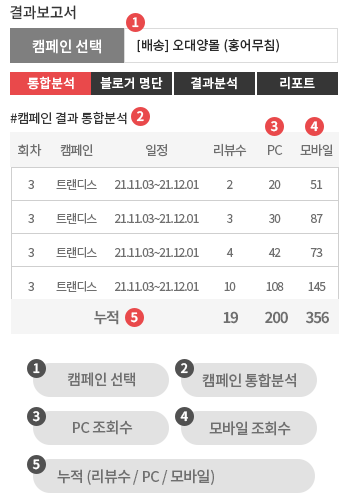
<style>
.page{position:relative;width:350px;height:500px;background:#ffffff}
.page>*{position:absolute;margin:0}
.t1{font:15px "NotoSansKR-Medium";letter-spacing:-0.02em;color:#363636}
.t2{font:13px "NotoSansKR-Bold";color:#ffffff}
.t3{font:15px "NotoSansKR-Medium";letter-spacing:-0.02em;color:#ffffff}
.t4{font:13px "NotoSansKR-Medium";color:#2b2b2b}
.t5{font:13px "NotoSansKR-Medium";color:#ffffff}
.t6{font:13px "NotoSansKR-Regular";letter-spacing:-0.02em;color:#363636}
.t7{font:12px/34px "NotoSansKR-Regular";color:#6f6f6f}
.t8{font:13px/34px "NotoSansKR-Regular";color:#6f6f6f}
.t9{font:12px/34px "NotoSansKR-Regular";letter-spacing:-0.08em;color:#6f6f6f}
.t10{font:13px/34px "NotoSansKR-Regular";letter-spacing:-0.08em;color:#6f6f6f}
.t11{font:15px "NotoSansKR-Bold";letter-spacing:-0.08em;color:#6f6f6f}
.t12{font:15px "NotoSansKR-Medium";letter-spacing:-0.04em;color:#6f6f6f}
</style>
<div class="page">
<p class="t1" style="left:10px;top:5px;width:66px;height:15px">결과보고서</p>
<p class="t2" style="left:132px;top:17px;width:7px;height:11px">1</p>
<p class="t3" style="left:32px;top:39px;width:69px;height:15px">캠페인 선택</p>
<p class="t4" style="left:137px;top:38px;width:142px;height:15px">[배송] 오대양몰 (홍어무침)</p>
<p class="t5" style="left:27px;top:76px;width:47px;height:14px">통합분석</p>
<p class="t5" style="left:100px;top:77px;width:63px;height:12px">블로거 명단</p>
<p class="t5" style="left:191px;top:77px;width:46px;height:13px">결과분석</p>
<p class="t5" style="left:280px;top:76px;width:35px;height:14px">리포트</p>
<p class="t6" style="left:10px;top:111px;width:117px;height:14px">#캠페인 결과 통합분석</p>
<p class="t2" style="left:136px;top:111px;width:8px;height:11px">2</p>
<p class="t2" style="left:270px;top:121px;width:8px;height:11px">3</p>
<p class="t2" style="left:310px;top:121px;width:8px;height:11px">4</p>
<p class="t7" style="left:18px;top:144px;width:24px;height:147px;text-align:center"><span class="t8">회차 <br></span>3<br>3<br>3<br>3</p>
<p class="t9" style="left:56px;top:144px;width:41px;height:148px;text-align:center"><span class="t10">캠페인<br></span>트랜디스<br>트랜디스<br>트랜디스<br>트랜디스</p>
<p class="t9" style="left:115px;top:144px;width:84px;height:147px;text-align:center"><span class="t10">일정<br></span>21.11.03~21.12.01<br>21.11.03~21.12.01<br>21.11.03~21.12.01<br>21.11.03~21.12.01</p>
<p class="t9" style="left:214px;top:143px;width:33px;height:148px;text-align:center"><span class="t10">리뷰수<br></span>2<br>3<br>4<br>10</p>
<p class="t9" style="left:266px;top:145px;width:18px;height:146px;text-align:center"><span class="t10">PC<br></span>20<br>30<br>42<br>108</p>
<p class="t9" style="left:300px;top:144px;width:33px;height:147px;text-align:center"><span class="t10">모바일<br></span>51<br>87<br>73<br>145</p>
<p class="t11" style="left:94px;top:310px;width:25px;height:15px">누적</p>
<p class="t2" style="left:130px;top:312px;width:8px;height:11px">5</p>
<p class="t11" style="left:223px;top:311px;width:15px;height:13px">19</p>
<p class="t11" style="left:265px;top:311px;width:23px;height:13px">200</p>
<p class="t11" style="left:306px;top:311px;width:23px;height:13px">356</p>
<p class="t2" style="left:33px;top:363px;width:7px;height:11px">1</p>
<p class="t2" style="left:180px;top:363px;width:8px;height:11px">2</p>
<p class="t12" style="left:67px;top:372px;width:68px;height:15px">캠페인 선택</p>
<p class="t12" style="left:202px;top:373px;width:94px;height:15px">캠페인 통합분석</p>
<p class="t2" style="left:32px;top:411px;width:8px;height:11px">3</p>
<p class="t2" style="left:180px;top:411px;width:8px;height:11px">4</p>
<p class="t12" style="left:73px;top:420px;width:60px;height:15px">PC 조회수</p>
<p class="t12" style="left:209px;top:421px;width:82px;height:15px">모바일 조회수</p>
<p class="t2" style="left:32px;top:459px;width:8px;height:11px">5</p>
<p class="t12" style="left:57px;top:469px;width:157px;height:16px">누적 (리뷰수 / PC / 모바일)</p>
</div>
